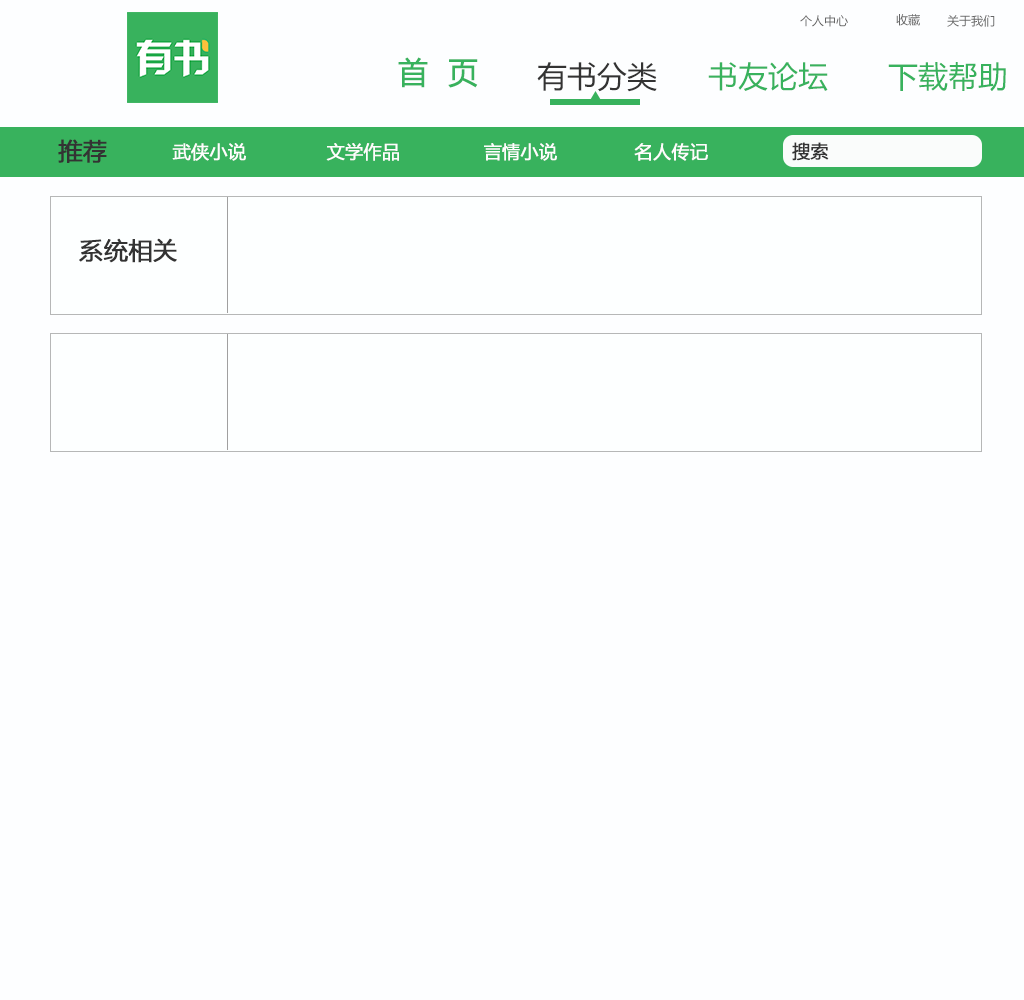
<style>
.page{position:relative;width:1024px;height:1000px;background:#fdfeff}
.page>*{position:absolute;margin:0}
.t1{font:12px "MicrosoftYaHei";color:#666666}
.t2{font:30px "MicrosoftYaHei";color:#38b25d;font-weight:bold}
.t3{font:30px "MicrosoftYaHei";color:#333333}
.t4{font:30px "MicrosoftYaHei";color:#38b25d}
.t5{font:24px "MicrosoftYaHei";color:#333333;font-weight:bold}
.t6{font:18px "MicrosoftYaHei";color:#fefdfd;font-weight:bold}
.t7{font:18px "MicrosoftYaHei";color:#333333;font-weight:bold}
</style>
<div class="page">
<p class="t1" style="left:800px;top:15px;width:48px;height:12px">个人中心</p>
<p class="t1" style="left:896px;top:14px;width:24px;height:12px">收藏</p>
<p class="t1" style="left:947px;top:15px;width:48px;height:12px">关于我们</p>
<p class="t2" style="left:398px;top:57px;width:80px;height:31px">首  页</p>
<p class="t3" style="left:537px;top:62px;width:120px;height:30px">有书分类</p>
<p class="t4" style="left:708px;top:62px;width:120px;height:29px">书友论坛</p>
<p class="t4" style="left:888px;top:62px;width:118px;height:29px">下载帮助</p>
<p class="t5" style="left:58px;top:139px;width:49px;height:24px">推荐</p>
<p class="t6" style="left:172px;top:143px;width:74px;height:18px">武侠小说</p>
<p class="t6" style="left:326px;top:143px;width:73px;height:18px">文学作品</p>
<p class="t6" style="left:484px;top:143px;width:73px;height:18px">言情小说</p>
<p class="t6" style="left:634px;top:143px;width:74px;height:18px">名人传记</p>
<p class="t7" style="left:792px;top:142px;width:37px;height:19px">搜索</p>
<p class="t5" style="left:79px;top:238px;width:98px;height:25px">系统相关</p>
</div>
